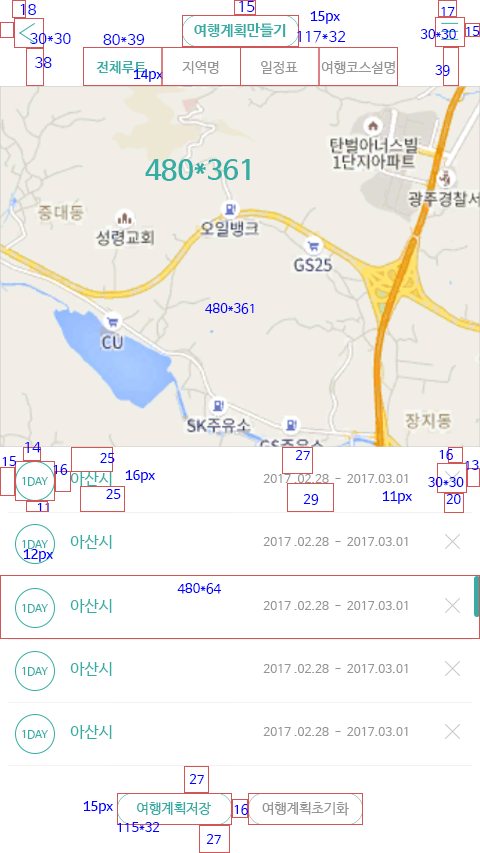
<style>
.page{position:relative;width:480px;height:853px;background:#ffffff}
.page>*{position:absolute;margin:0}
.t1{font:15px "NanumBarunGothic";color:#0000ff}
.t2{font:13px "MoebiusKorea-Regular";color:#0000ff}
.t3{font:13px "NanumBarunGothic";color:#0000ff}
.t4{font:15px "NanumBarunGothicBold";color:#36ada4}
.t5{font:14px "NanumBarunGothicBold";color:#36ada4}
.t6{font:14px "NanumBarunGothic";color:#959595}
.t7{font:28px "NanumBarunGothicBold";color:#36ada4}
.t8{font:16px "NanumBarunGothic";color:#36ada4}
.t9{font:10.7px "NanumBarunGothic";color:#36ada4}
.t10{font:12px "NanumBarunGothic";color:#959595}
.t11{font:14.1px "NanumBarunGothic";color:#36ada4}
.t12{font:14.1px "NanumBarunGothic";color:#959595}
</style>
<div class="page">
<p class="t1" style="left:20px;top:4px;width:16px;height:11px">18</p>
<p class="t1" style="left:239px;top:1px;width:16px;height:11px">15</p>
<p class="t2" style="left:310px;top:11px;width:30px;height:13px">15px</p>
<p class="t3" style="left:441px;top:7px;width:14px;height:9px">17</p>
<p class="t4" style="left:194px;top:23px;width:92px;height:15px">여행계획만들기</p>
<p class="t3" style="left:420px;top:29px;width:36px;height:10px">30*30</p>
<p class="t3" style="left:466px;top:26px;width:14px;height:10px">15</p>
<p class="t1" style="left:30px;top:33px;width:41px;height:11px">30*30</p>
<p class="t1" style="left:103px;top:34px;width:42px;height:11px">80*39</p>
<p class="t1" style="left:297px;top:31px;width:49px;height:12px">117*32</p>
<p class="t1" style="left:35px;top:57px;width:17px;height:11px">38</p>
<p class="t5" style="left:96px;top:61px;width:51px;height:13px">전체루트</p>
<p class="t6" style="left:182px;top:61px;width:37px;height:13px">지역명</p>
<p class="t6" style="left:261px;top:61px;width:37px;height:13px">일정표</p>
<p class="t6" style="left:321px;top:61px;width:74px;height:13px">여행코스설명</p>
<p class="t3" style="left:435px;top:65px;width:15px;height:11px">39</p>
<p class="t2" style="left:133px;top:69px;width:30px;height:13px">14px</p>
<p class="t7" style="left:145px;top:159px;width:105px;height:22px">480*361</p>
<p class="t3" style="left:205px;top:303px;width:49px;height:11px">480*361</p>
<p class="t1" style="left:25px;top:442px;width:16px;height:11px">14</p>
<p class="t3" style="left:439px;top:449px;width:14px;height:11px">16</p>
<p class="t3" style="left:2px;top:456px;width:15px;height:10px">15</p>
<p class="t3" style="left:100px;top:453px;width:15px;height:10px">25</p>
<p class="t3" style="left:295px;top:450px;width:15px;height:10px">27</p>
<p class="t3" style="left:465px;top:460px;width:14px;height:10px">13</p>
<p class="t3" style="left:53px;top:464px;width:15px;height:11px">16</p>
<p class="t8" style="left:70px;top:472px;width:42px;height:14px">아산시</p>
<p class="t2" style="left:125px;top:470px;width:30px;height:13px">16px</p>
<p class="t9" style="left:22px;top:477px;width:26px;height:9px">1DAY</p>
<p class="t10" style="left:263px;top:474px;width:145px;height:9px">2017 .02.28  -  2017.03.01</p>
<p class="t3" style="left:428px;top:477px;width:36px;height:10px">30*30</p>
<p class="t3" style="left:106px;top:489px;width:15px;height:10px">25</p>
<p class="t3" style="left:303px;top:494px;width:16px;height:11px">29</p>
<p class="t2" style="left:382px;top:491px;width:30px;height:13px">11px</p>
<p class="t3" style="left:446px;top:494px;width:15px;height:10px">20</p>
<p class="t3" style="left:38px;top:503px;width:11px;height:9px">11</p>
<p class="t9" style="left:22px;top:540px;width:26px;height:9px">1DAY</p>
<p class="t8" style="left:70px;top:535px;width:42px;height:14px">아산시</p>
<p class="t10" style="left:263px;top:537px;width:145px;height:9px">2017 .02.28  -  2017.03.01</p>
<p class="t2" style="left:23px;top:549px;width:30px;height:13px">12px</p>
<p class="t3" style="left:177px;top:583px;width:44px;height:11px">480*64</p>
<p class="t9" style="left:22px;top:604px;width:26px;height:9px">1DAY</p>
<p class="t8" style="left:70px;top:599px;width:42px;height:14px">아산시</p>
<p class="t10" style="left:263px;top:601px;width:145px;height:9px">2017 .02.28  -  2017.03.01</p>
<p class="t8" style="left:70px;top:662px;width:42px;height:14px">아산시</p>
<p class="t10" style="left:263px;top:664px;width:145px;height:9px">2017 .02.28  -  2017.03.01</p>
<p class="t9" style="left:22px;top:667px;width:26px;height:9px">1DAY</p>
<p class="t8" style="left:70px;top:725px;width:42px;height:14px">아산시</p>
<p class="t9" style="left:22px;top:730px;width:26px;height:9px">1DAY</p>
<p class="t10" style="left:263px;top:727px;width:145px;height:9px">2017 .02.28  -  2017.03.01</p>
<p class="t3" style="left:189px;top:774px;width:15px;height:10px">27</p>
<p class="t2" style="left:83px;top:801px;width:30px;height:13px">15px</p>
<p class="t11" style="left:137px;top:802px;width:74px;height:13px">여행계획저장</p>
<p class="t3" style="left:234px;top:804px;width:14px;height:11px">16</p>
<p class="t12" style="left:262px;top:802px;width:87px;height:14px">여행계획초기화</p>
<p class="t3" style="left:117px;top:822px;width:43px;height:10px">115*32</p>
<p class="t3" style="left:206px;top:834px;width:15px;height:10px">27</p>
</div>
